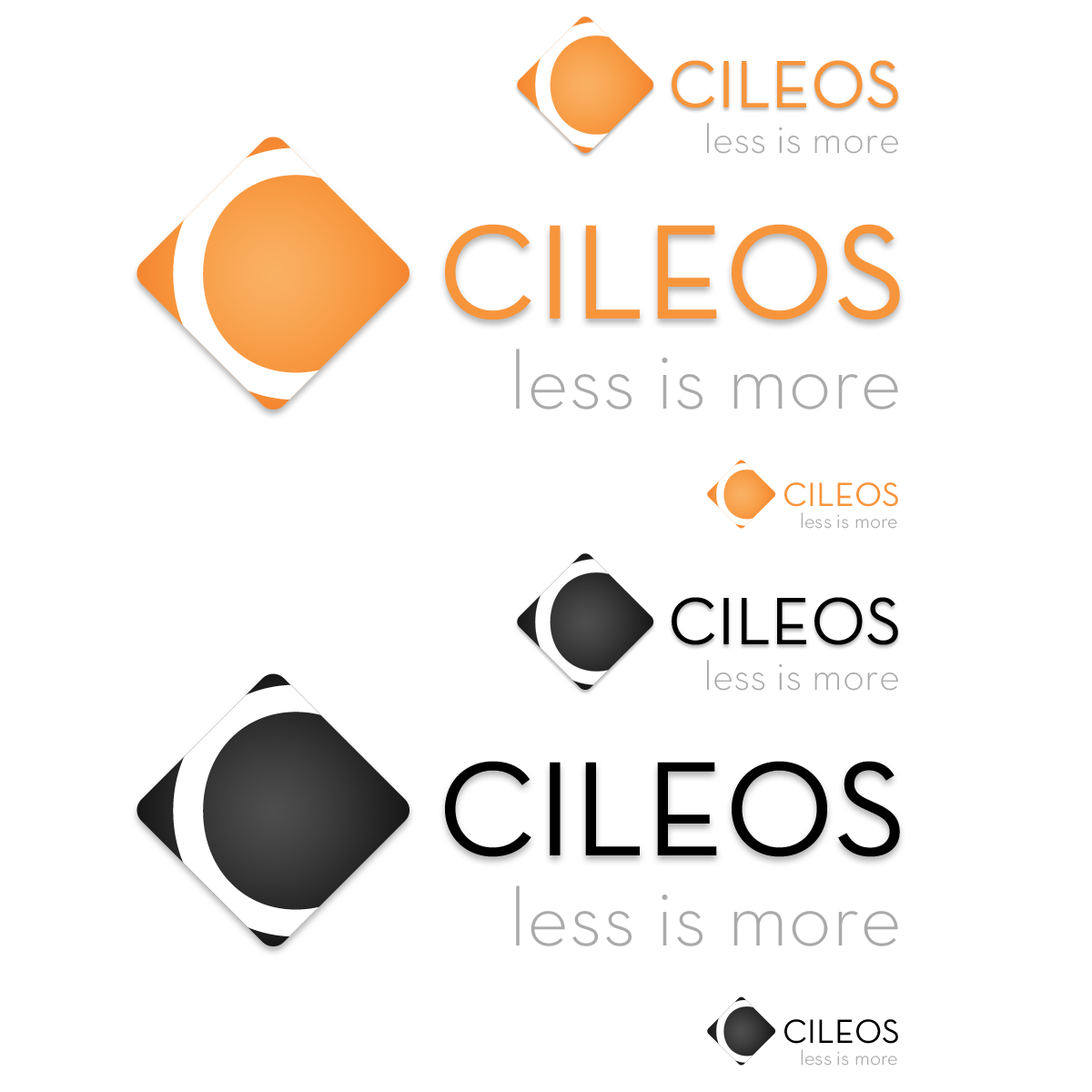
<style>
.page{position:relative;width:1092px;height:1092px;background:#ffffff}
.page>*{position:absolute;margin:0}
.t1{font:68.2px "NeutraText-Book";color:#f7953c}
.t2{font:41.3px "NeutraText-Light";color:#aaaaaa}
.t3{font:136.5px "NeutraText-Book";color:#f7953c}
.t4{font:82.7px "NeutraText-Light";color:#aaaaaa}
.t5{font:34.1px "NeutraText-Book";color:#f7953c}
.t6{font:20.7px "NeutraText-Light";color:#aaaaaa}
.t7{font:68.2px "NeutraText-Book";color:#000000}
.t8{font:136.5px "NeutraText-Book";color:#000000}
.t9{font:34.1px "NeutraText-Book";color:#000000}
</style>
<div class="page">
<p class="t1" style="left:672px;top:60px;width:226px;height:48px">CILEOS</p>
<p class="t2" style="left:707px;top:123px;width:191px;height:31px">less is more</p>
<p class="t3" style="left:445px;top:224px;width:455px;height:96px">CILEOS</p>
<p class="t4" style="left:516px;top:349px;width:382px;height:60px">less is more</p>
<p class="t5" style="left:784px;top:482px;width:114px;height:25px">CILEOS</p>
<p class="t6" style="left:801px;top:512px;width:96px;height:17px">less is more</p>
<p class="t7" style="left:672px;top:597px;width:226px;height:48px">CILEOS</p>
<p class="t2" style="left:707px;top:660px;width:191px;height:31px">less is more</p>
<p class="t8" style="left:445px;top:761px;width:455px;height:96px">CILEOS</p>
<p class="t4" style="left:516px;top:885px;width:382px;height:61px">less is more</p>
<p class="t9" style="left:784px;top:1019px;width:114px;height:25px">CILEOS</p>
<p class="t6" style="left:801px;top:1049px;width:96px;height:17px">less is more</p>
</div>
